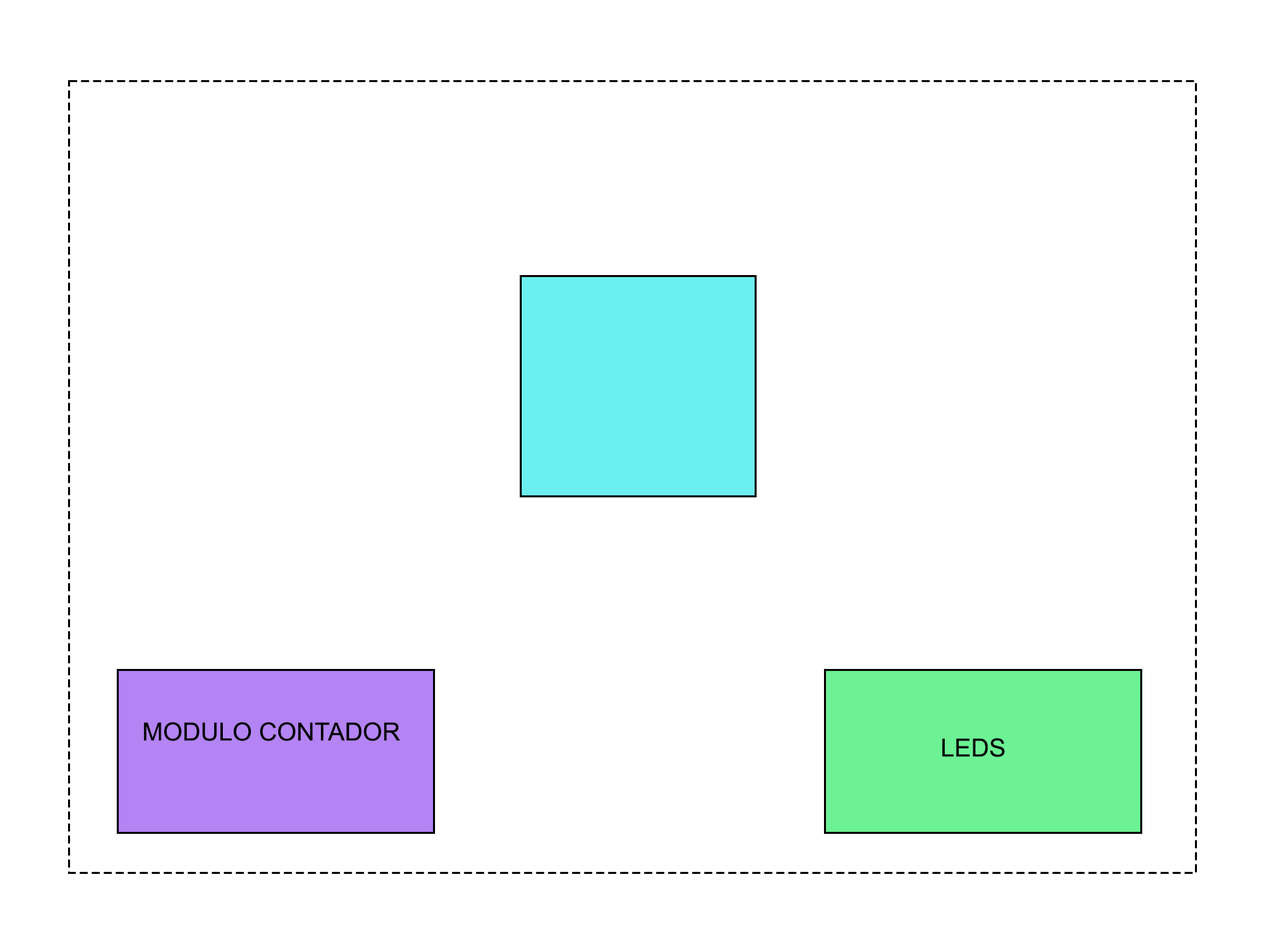
<style>
.page{position:relative;width:1261px;height:946px;background:#ffffff}
.page>*{position:absolute;margin:0}
.t1{font:25px "ArialMT";color:#010101}
</style>
<div class="page">
<p class="t1" style="left:143px;top:721px;width:257px;height:20px">MODULO CONTADOR</p>
<p class="t1" style="left:942px;top:737px;width:63px;height:20px">LEDS</p>
</div>
